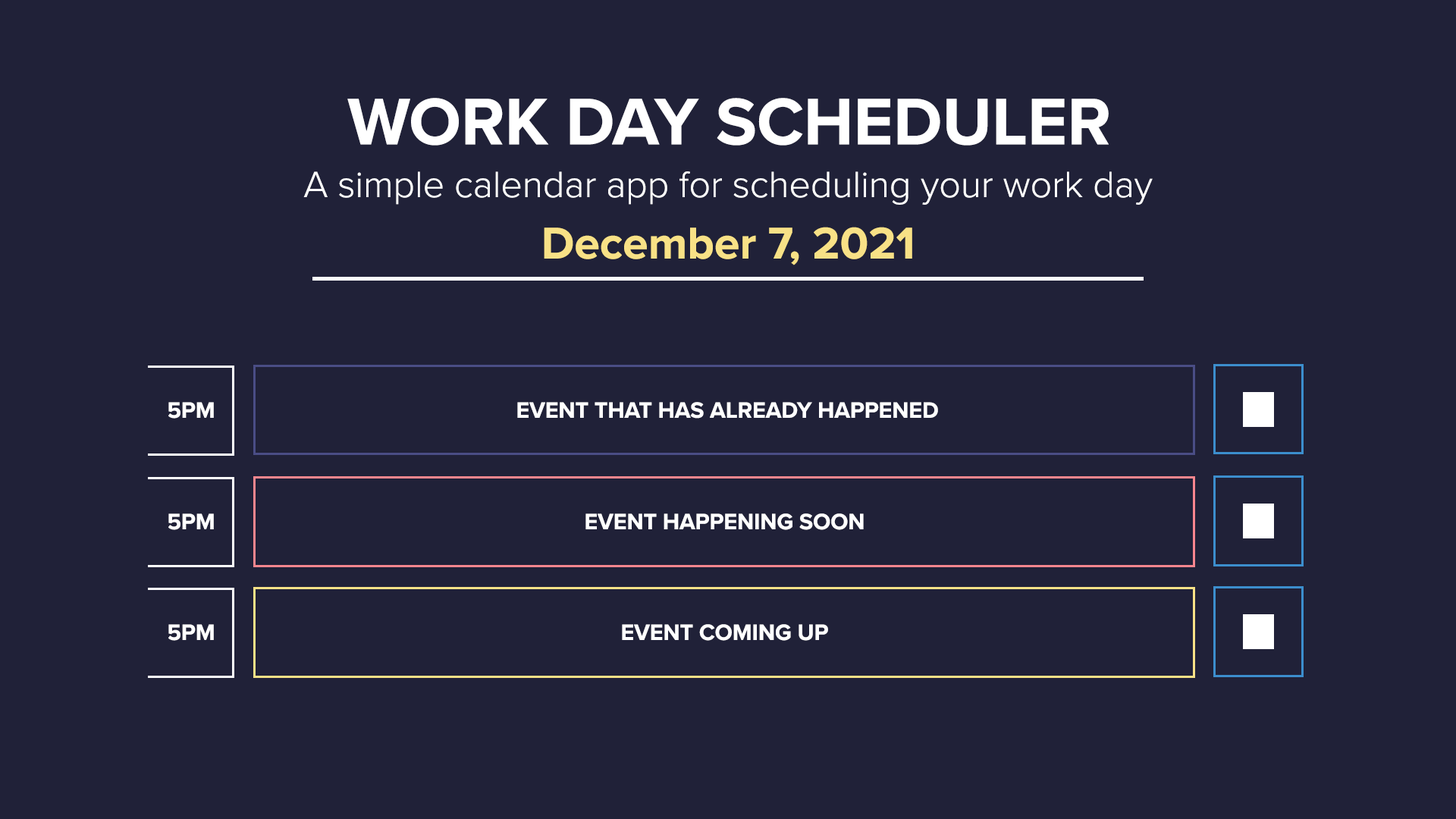
<style>
.page{position:relative;width:1456px;height:819px;background:#202138}
.page>*{position:absolute;margin:0}
.t1{font:68.2px "ProximaNova-Bold";color:#ffffff;text-transform:uppercase}
.t2{font:37.9px "ProximaNova-Light";color:#ffffff}
.t3{font:46px "ProximaNova-Bold";color:#f8e186}
.t4{font:23px "ProximaNova-Bold";color:#ffffff;text-transform:uppercase}
.t5{font:22.9px "ProximaNova-Bold";color:#ffffff;text-transform:uppercase}
</style>
<div class="page">
<p class="t1" style="left:347px;top:98px;width:762px;height:48px">Work Day Scheduler</p>
<p class="t2" style="left:303px;top:171px;width:850px;height:34px">A simple calendar app for scheduling your work day</p>
<p class="t3" style="left:544px;top:227px;width:368px;height:38px">December 7, 2021</p>
<p class="t4" style="left:168px;top:402px;width:46px;height:17px">5pm</p>
<p class="t5" style="left:517px;top:402px;width:421px;height:17px">Event that has already happened</p>
<p class="t4" style="left:168px;top:513px;width:46px;height:17px">5pm</p>
<p class="t4" style="left:585px;top:513px;width:279px;height:17px">Event Happening Soon</p>
<p class="t4" style="left:168px;top:624px;width:46px;height:17px">5pm</p>
<p class="t4" style="left:622px;top:624px;width:206px;height:17px">Event Coming Up</p>
</div>
